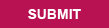
<style>
.page{position:relative;width:109px;height:28px;background:#b81252}
.page>*{position:absolute;margin:0}
.t1{font:14px "Arial-BoldMT";color:#ffffff}
</style>
<div class="page">
<p class="t1" style="left:28px;top:9px;width:53px;height:10px">SUBMIT</p>
</div>
